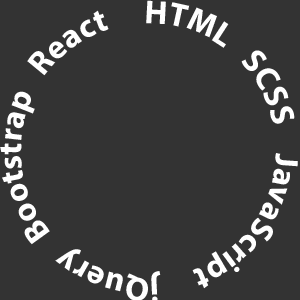
<style>
.page{position:relative;width:300px;height:300px;background:#333333}
.page>*{position:absolute;margin:0}
.t1{font:33.3px "MyriadPro-Bold";color:#ffffff}
</style>
<div class="page">
<p class="t1" style="left:0px;top:0px;width:298px;height:302px">HTML   SCSS    JavaScript     jQuery   Bootstrap   React  Redux</p>
</div>
